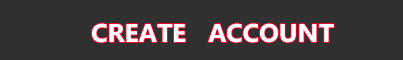
<style>
.page{position:relative;width:403px;height:60px;background:#303030}
.page>*{position:absolute;margin:0}
.t1{font:25.7px "Gadugi-Bold";color:#ffffff}
</style>
<div class="page">
<p class="t1" style="left:92px;top:23px;width:242px;height:20px">CREATE   ACCOUNT</p>
</div>
